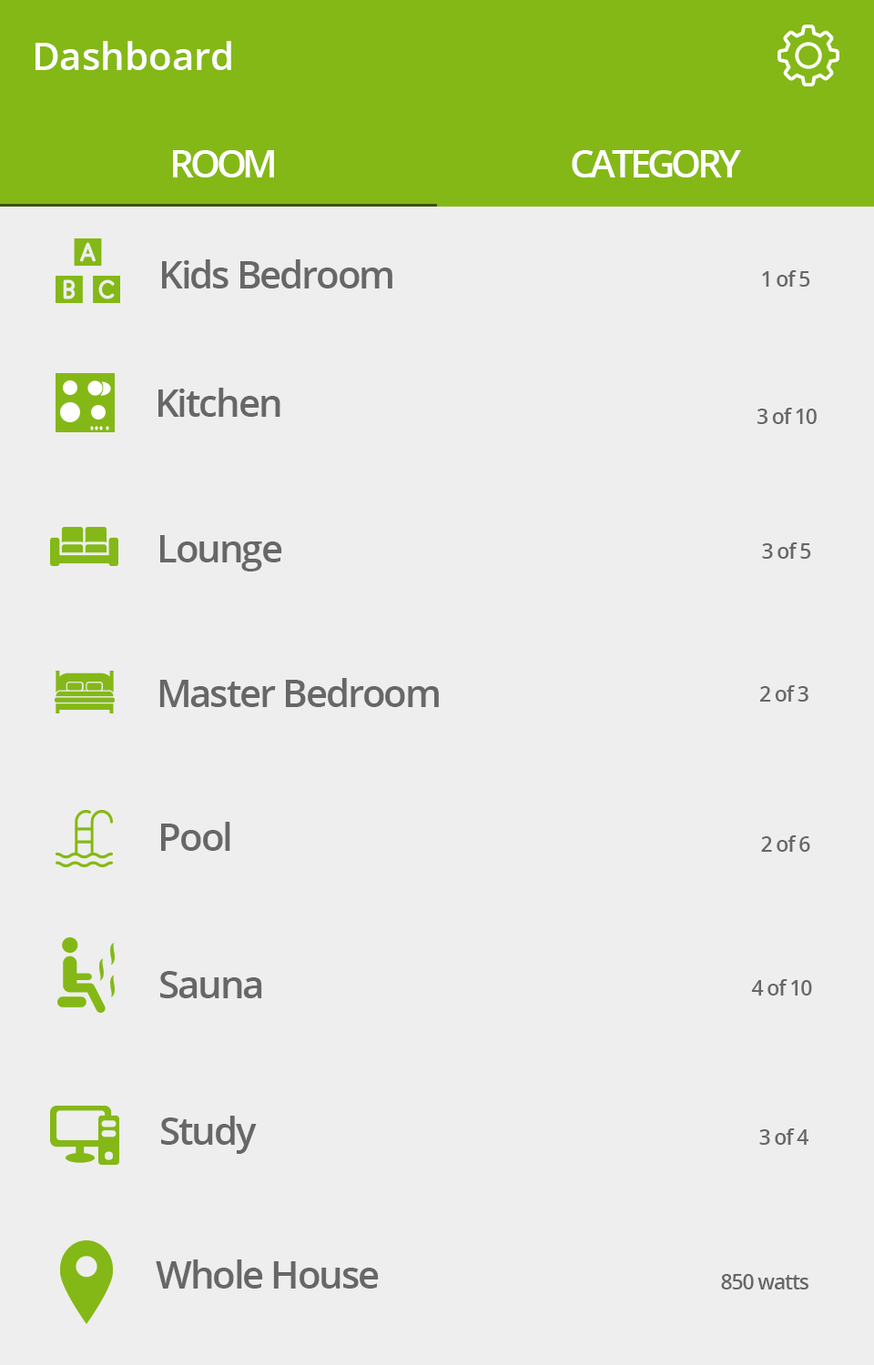
<style>
.page{position:relative;width:874px;height:1365px;background:#eeeeee}
.page>*{position:absolute;margin:0}
.t1{font:38.2px "OpenSans-Semibold";color:#ffffff}
.t2{font:38.2px "OpenSans-Semibold";letter-spacing:-0.1em;color:#ffffff}
.t3{font:38.2px "OpenSans-Semibold";letter-spacing:-0.05em;color:#676767}
.t4{font:20.9px "OpenSans-Semibold";letter-spacing:-0.05em;color:#676767}
</style>
<div class="page">
<p class="t1" style="left:35px;top:41px;width:196px;height:29px">Dashboard</p>
<p class="t2" style="left:173px;top:150px;width:101px;height:27px">ROOM</p>
<p class="t2" style="left:571px;top:150px;width:170px;height:27px">CATEGORY</p>
<p class="t3" style="left:162px;top:259px;width:230px;height:29px">Kids Bedroom</p>
<p class="t4" style="left:762px;top:270px;width:48px;height:17px">1 of 5</p>
<p class="t3" style="left:158px;top:388px;width:122px;height:29px">Kitchen</p>
<p class="t4" style="left:757px;top:408px;width:59px;height:16px">3 of 10</p>
<p class="t3" style="left:160px;top:535px;width:122px;height:36px">Lounge</p>
<p class="t4" style="left:762px;top:542px;width:49px;height:17px">3 of 5</p>
<p class="t3" style="left:159px;top:678px;width:280px;height:29px">Master Bedroom</p>
<p class="t4" style="left:760px;top:685px;width:48px;height:17px">2 of 3</p>
<p class="t3" style="left:161px;top:822px;width:69px;height:29px">Pool</p>
<p class="t4" style="left:761px;top:835px;width:49px;height:17px">2 of 6</p>
<p class="t3" style="left:160px;top:971px;width:102px;height:27px">Sauna</p>
<p class="t4" style="left:751px;top:979px;width:61px;height:17px">4 of 10</p>
<p class="t3" style="left:161px;top:1116px;width:96px;height:38px">Study</p>
<p class="t4" style="left:759px;top:1128px;width:49px;height:17px">3 of 4</p>
<p class="t3" style="left:156px;top:1259px;width:223px;height:30px">Whole House</p>
<p class="t4" style="left:721px;top:1274px;width:87px;height:15px">850 watts</p>
</div>
